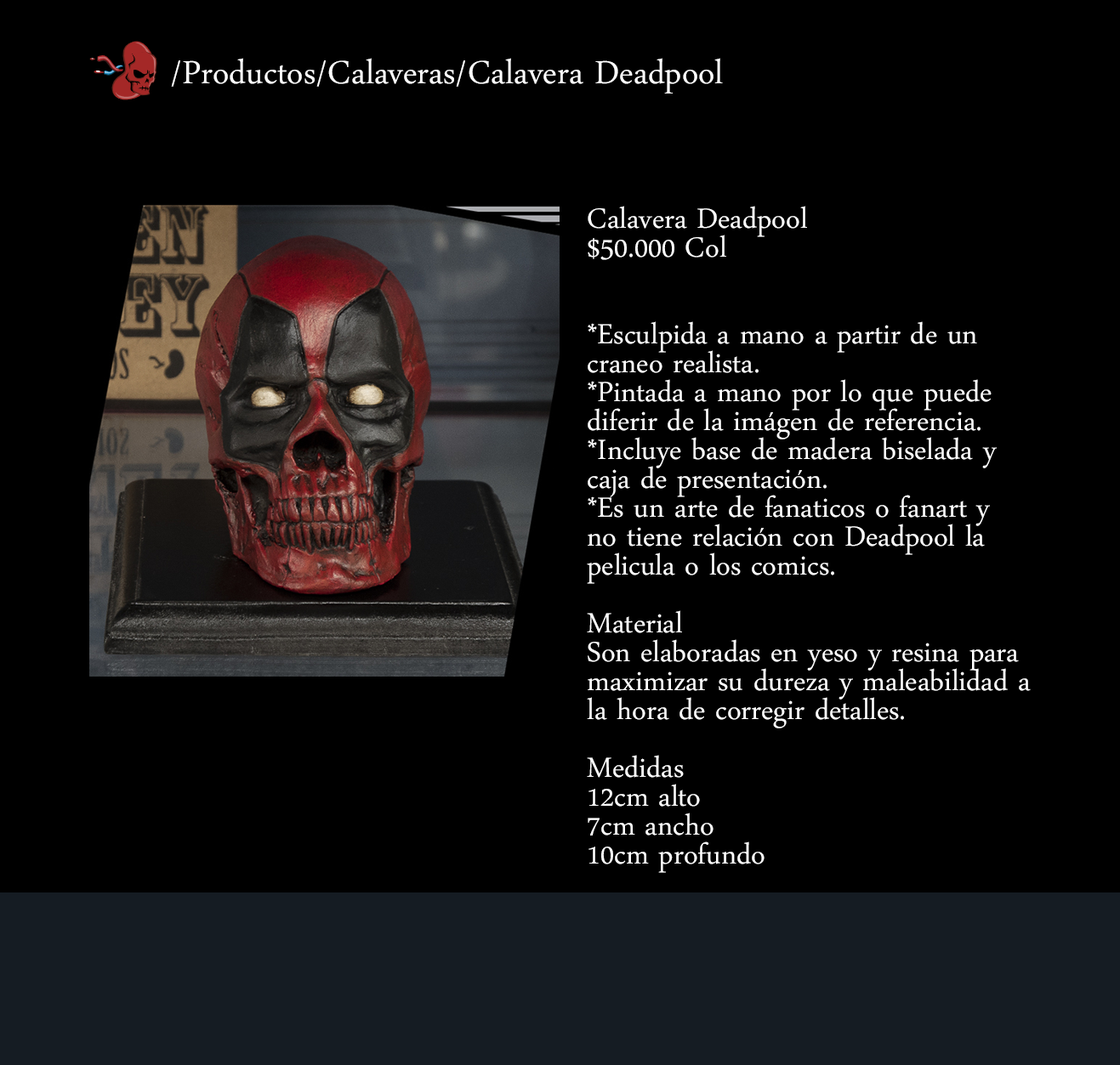
<style>
.page{position:relative;width:1120px;height:1065px;background:#000000}
.page>*{position:absolute;margin:0}
.t1{font:47.2px "DaunPenh";color:#ffffff}
.t2{font:40.8px/28.9px "DaunPenh";color:#ffffff}
</style>
<div class="page">
<p class="t1" style="left:171px;top:58px;width:552px;height:36px">/Productos/Calaveras/Calavera Deadpool</p>
<p class="t2" style="left:587px;top:206px;width:443px;height:667px">Calavera Deadpool<br>$50.000 Col<br><br><br>*Esculpida a mano a partir de un <br>craneo realista.<br>*Pintada a mano por lo que puede <br>diferir de la imágen de referencia.<br>*Incluye base de madera biselada y<br>caja de presentación.<br>*Es un arte de fanaticos o fanart y <br>no tiene relación con Deadpool la <br>pelicula o los comics.<br><br>Material<br>Son elaboradas en yeso y resina para<br>maximizar su dureza y maleabilidad a <br>la hora de corregir detalles.<br><br>Medidas <br>12cm alto<br>7cm ancho<br>10cm profundo</p>
</div>
